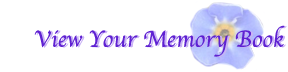
<style>
.page{position:relative;width:288px;height:72px;background:#ffffff}
.page>*{position:absolute;margin:0}
.t1{font:24px "Apple-Chancery";color:#5f21d2}
.t2{font:24px "Apple-Chancery";color:#c9b2f5}
</style>
<div class="page">
<p class="t1" style="left:34px;top:25px;width:251px;height:32px">View Your Memory Book</p>
<p class="t2" style="left:36px;top:26px;width:251px;height:31px">View Your Memory Book</p>
</div>
